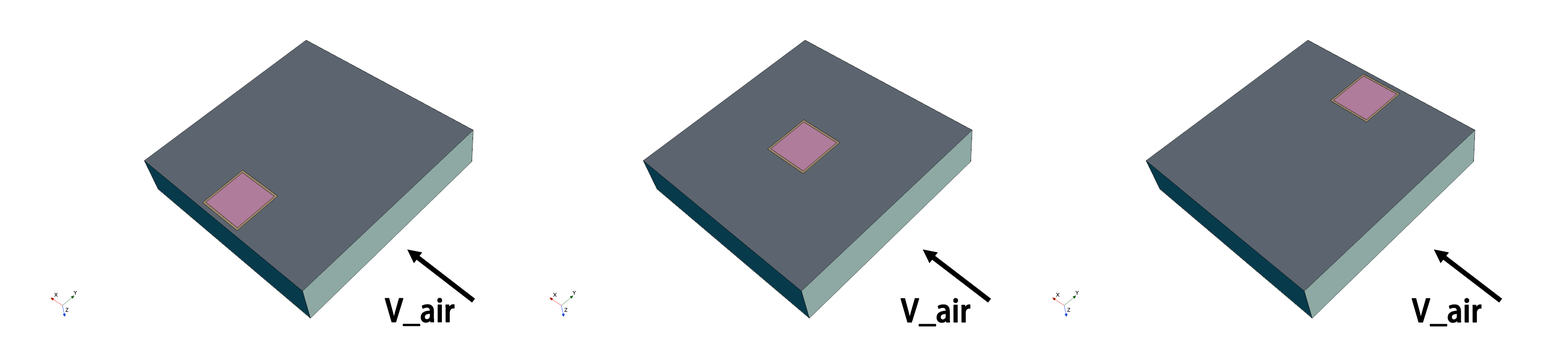
<style>
.page{position:relative;width:1568px;height:343px;background:#ffffff}
.page>*{position:absolute;margin:0}
.t1{font:30.7px "AdobeHeitiStd-Regular";letter-spacing:-0.02em;color:#000000;font-weight:bold;scale:0.95 1}
</style>
<div class="page">
<p class="t1" style="left:384px;top:298px;width:71px;height:29px">V_air</p>
<p class="t1" style="left:900px;top:298px;width:71px;height:29px">V_air</p>
<p class="t1" style="left:1411px;top:298px;width:71px;height:29px">V_air</p>
</div>
